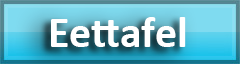
<style>
.page{position:relative;width:240px;height:64px}
.page>*{position:absolute;margin:0}
.t1{font:44.4px "Calibri-Bold";color:#ffffff}
</style>
<div class="page">
<p class="t1" style="left:51px;top:17px;width:135px;height:30px">Eettafel</p>
</div>
